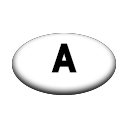
<style>
.page{position:relative;width:128px;height:128px;background:#ffffff}
.page>*{position:absolute;margin:0}
.t1{font:34.5px "LeagueSpartan-Bold";color:#000000;font-weight:bold;scale:0.83 1}
</style>
<div class="page">
<p class="t1" style="left:51px;top:43px;width:26px;height:30px">A</p>
</div>
